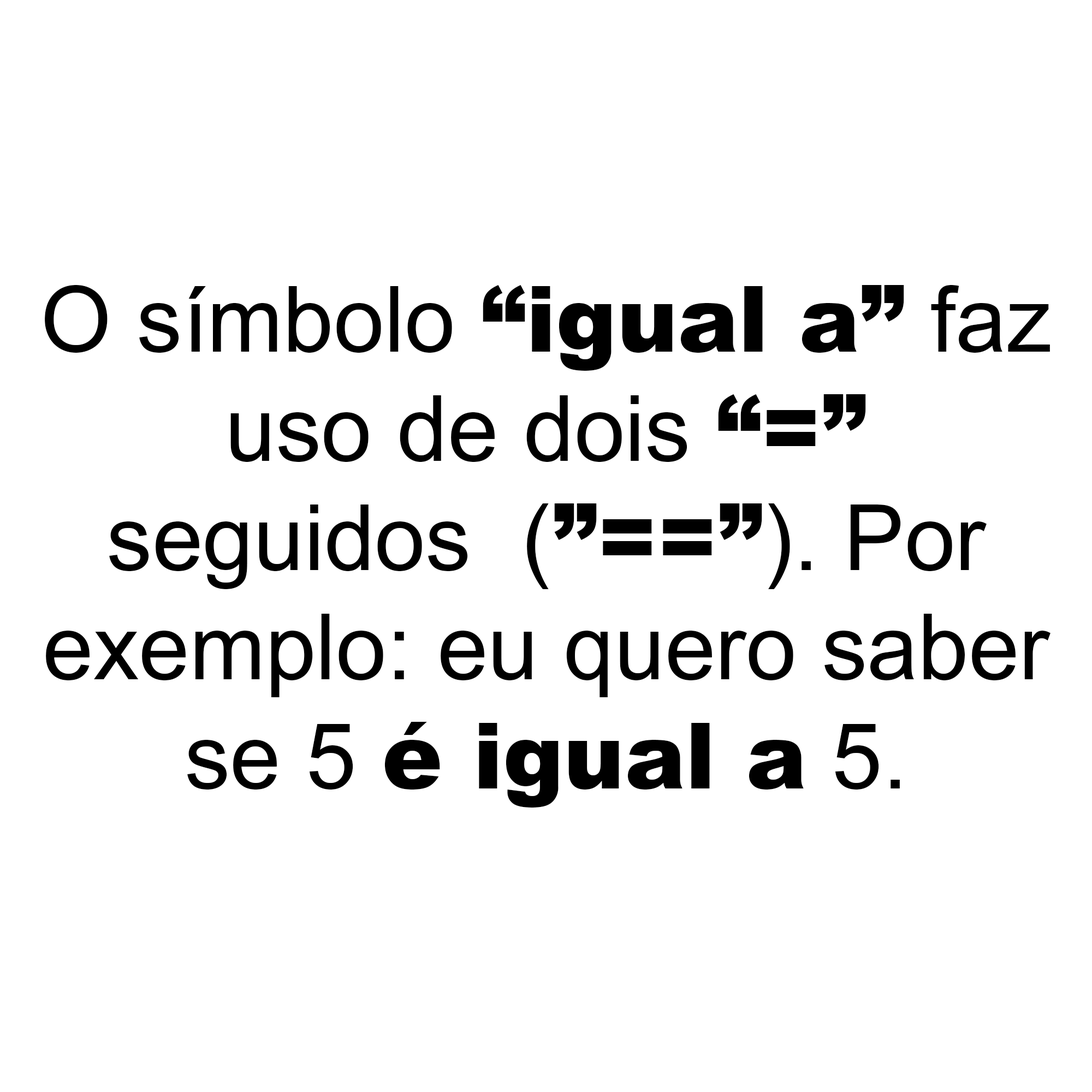
<style>
.page{position:relative;width:1092px;height:1092px;background:#ffffff}
.page>*{position:absolute;margin:0}
.t1{font:91px "ArialMT";color:#000000}
.t2{font:91px "Arial-Black";color:#000000}
</style>
<div class="page">
<p class="t1" style="left:45px;top:285px;width:1005px;height:523px;text-align:center">O símbolo <span class="t2">“igual a”</span> faz<br>uso de dois <span class="t2">“=”</span><br>seguidos  (<span class="t2">”==”</span>). Por<br>exemplo: eu quero saber<br>se 5 <span class="t2">é igual a</span> 5.</p>
</div>
